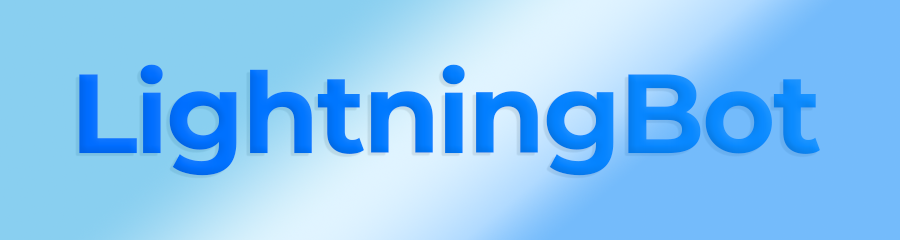
<style>
.page{position:relative;width:900px;height:240px}
.page>*{position:absolute;margin:0}
.t1{font:112.2px "MontserratRoman-Bold";letter-spacing:-0.025em;color:#057cff}
</style>
<div class="page">
<p class="t1" style="left:79px;top:64px;width:741px;height:112px">LightningBot</p>
</div>
